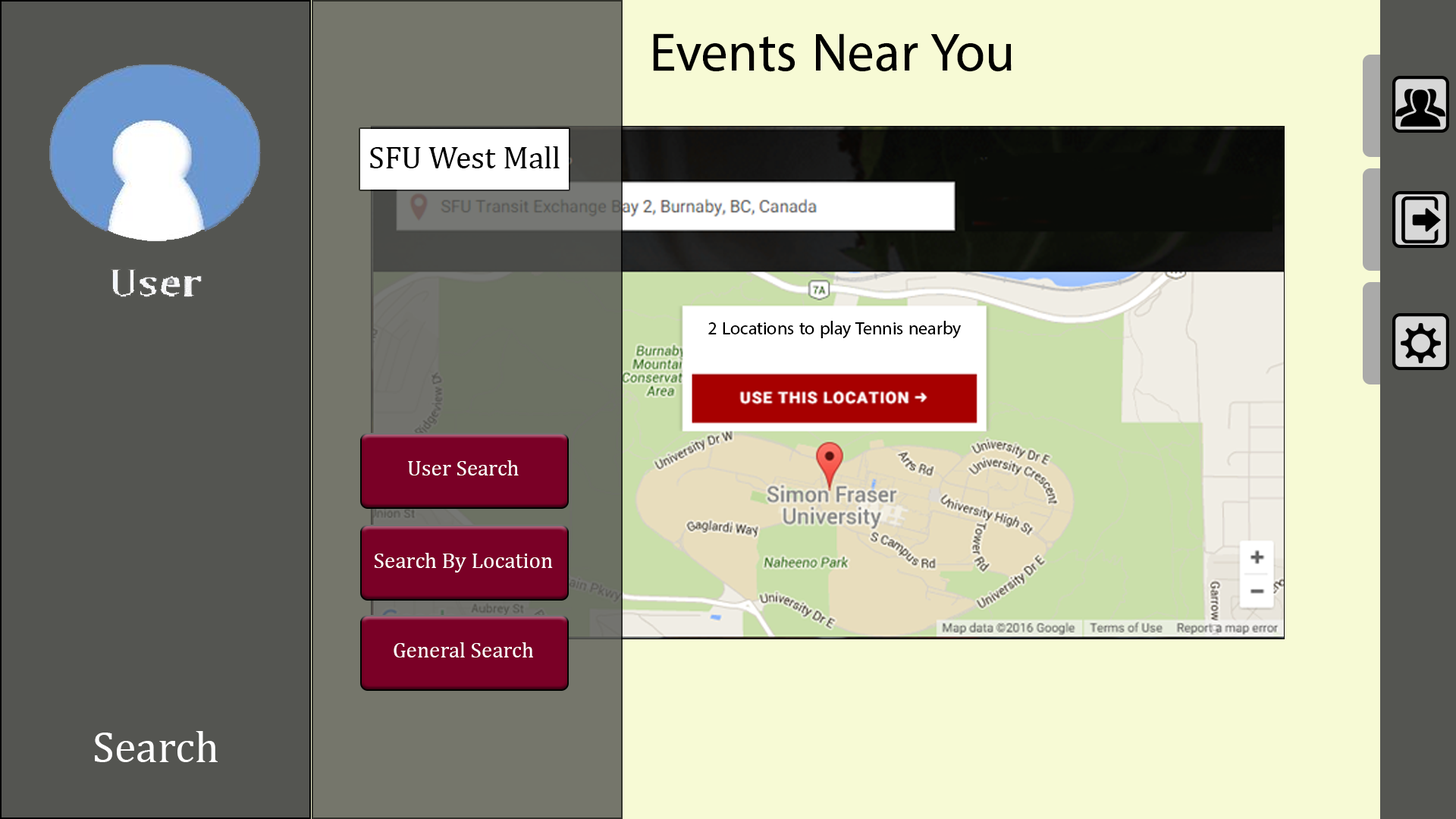
<style>
.page{position:relative;width:1456px;height:819px;background:#f7fad5}
.page>*{position:absolute;margin:0}
.t1{font:75.8px "MyriadArabic-Regular";color:#000000}
.t2{font:31.6px "Cambria";color:#000000}
.t3{font:25.3px "MyriadArabic-Regular";color:#000000}
.t4{font:22.1px "Cambria";color:#ffffff}
.t5{font:44.2px "Cambria";color:#ffffff}
</style>
<div class="page">
<p class="t1" style="left:653px;top:33px;width:359px;height:39px">Events Near You</p>
<p class="t2" style="left:370px;top:146px;width:190px;height:22px">SFU West Mall</p>
<p class="t3" style="left:708px;top:321px;width:253px;height:17px">2 Locations to play Tennis nearby</p>
<p class="t4" style="left:408px;top:460px;width:111px;height:15px">User Search</p>
<p class="t4" style="left:375px;top:553px;width:178px;height:20px">Search By Location</p>
<p class="t4" style="left:394px;top:642px;width:139px;height:15px">General Search</p>
<p class="t5" style="left:95px;top:731px;width:123px;height:31px">Search</p>
</div>
